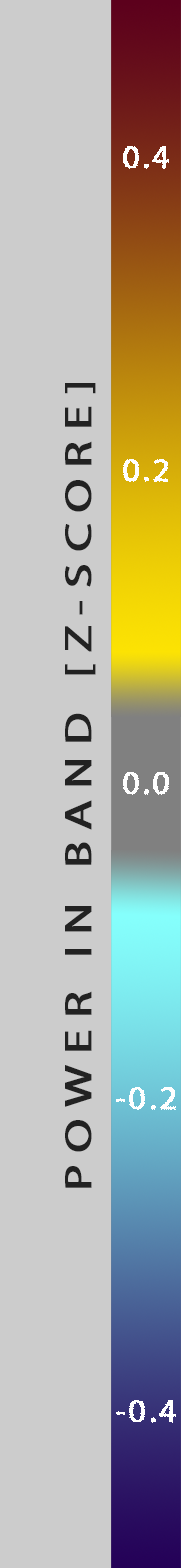
<style>
.page{position:relative;width:181px;height:1568px;background:#cccccc}
.page>*{position:absolute;margin:0}
.t1{font:33.3px "MyriadPro-Regular";letter-spacing:0.075em;color:#ffffff;font-variant:small-caps;font-weight:bold}
.t2{font:37.5px "MyriadPro-Regular";letter-spacing:0.215em;color:#222222;font-variant:small-caps;font-weight:bold;scale:1.3 1}
</style>
<div class="page">
<p class="t1" style="left:123px;top:146px;width:46px;height:23px">0.4</p>
<p class="t2" style="left:65px;top:383px;width:31px;height:805px;rotate:-90deg">POWER IN BAND [Z-SCORE]</p>
<p class="t1" style="left:123px;top:459px;width:46px;height:23px">0.2</p>
<p class="t1" style="left:123px;top:772px;width:46px;height:23px">0.0</p>
<p class="t1" style="left:116px;top:1087px;width:60px;height:23px">-0.2</p>
<p class="t1" style="left:116px;top:1400px;width:60px;height:23px">-0.4</p>
</div>
